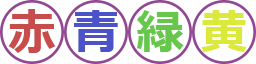
<style>
.page{position:relative;width:256px;height:64px;background:#ffffff}
.page>*{position:absolute;margin:0}
.t1{font:48px "Meiryo-Bold";color:#c74c4c}
.t2{font:48px "Meiryo-Bold";color:#4c52c7}
.t3{font:48px "Meiryo-Bold";color:#66c74c}
.t4{font:48px "Meiryo-Bold";color:#dbe93a}
</style>
<div class="page">
<p class="t1" style="left:8px;top:9px;width:48px;height:44px">赤</p>
<p class="t2" style="left:74px;top:10px;width:44px;height:42px">青</p>
<p class="t3" style="left:137px;top:10px;width:47px;height:42px">緑</p>
<p class="t4" style="left:201px;top:10px;width:46px;height:42px">黄</p>
</div>
